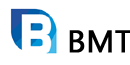
<style>
.page{position:relative;width:130px;height:65px;background:#ffffff}
.page>*{position:absolute;margin:0}
.t1{font:30.9px "SegoeUI";letter-spacing:0.005em;color:#000000;font-weight:bold}
</style>
<div class="page">
<p class="t1" style="left:69px;top:30px;width:63px;height:23px">BMT</p>
</div>
